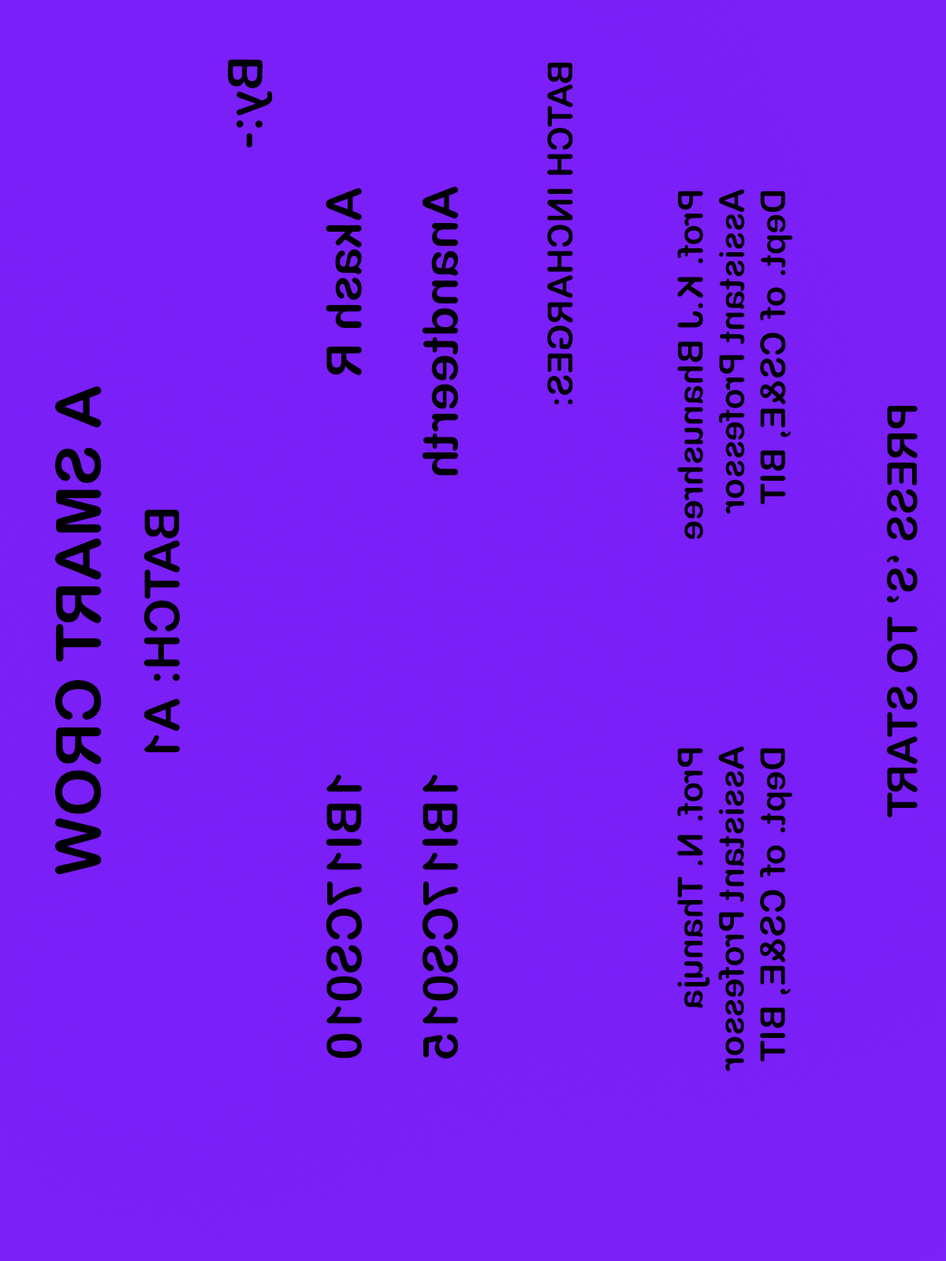
<style>
.page{position:relative;width:946px;height:1261px;background:#7a1ff7}
.page>*{position:absolute;margin:0}
.t1{font:48.1px "ArialRoundedMTBold";color:#000000}
.t2{font:34.4px "ArialRoundedMTBold";color:#000000}
.t3{font:61.9px "ArialRoundedMTBold";color:#000000}
.t4{font:41.2px "ArialRoundedMTBold";color:#000000}
</style>
<div class="page">
<p class="t1" style="left:228px;top:59px;width:45px;height:88px;rotate:90deg">By:-</p>
<p class="t2" style="left:547px;top:62px;width:26px;height:342px;rotate:90deg">BATCH INCHARGES:</p>
<p class="t1" style="left:422px;top:186px;width:36px;height:289px;rotate:90deg">Anandteerth</p>
<p class="t1" style="left:325px;top:188px;width:37px;height:187px;rotate:90deg">Akash R</p>
<p class="t2" style="left:677px;top:189px;width:116px;height:350px;rotate:90deg">Prof. K.J Bhanushree  <br>Assistant Professor<br>Dept. of CS&amp;E, BIT</p>
<p class="t3" style="left:55px;top:386px;width:47px;height:489px;rotate:90deg">A SMART CROW</p>
<p class="t4" style="left:887px;top:406px;width:30px;height:412px;rotate:90deg">PRESS ‘S’ TO START</p>
<p class="t1" style="left:143px;top:509px;width:37px;height:244px;rotate:90deg">BATCH: A1</p>
<p class="t2" style="left:677px;top:746px;width:115px;height:325px;rotate:90deg">Prof. N. Thanuja   <br>Assistant Professor<br>Dept. of CS&amp;E, BIT</p>
<p class="t1" style="left:325px;top:775px;width:37px;height:283px;rotate:90deg">1BI17CS010</p>
<p class="t1" style="left:422px;top:775px;width:36px;height:283px;rotate:90deg">1BI17CS015</p>
</div>
